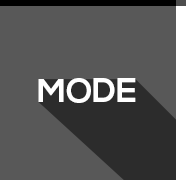
<style>
.page{position:relative;width:186px;height:180px;background:#585858}
.page>*{position:absolute;margin:0}
.t1{font:33.6px "NexaBold";color:#ffffff}
</style>
<div class="page">
<p class="t1" style="left:38px;top:78px;width:98px;height:25px">MODE</p>
</div>
